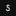
<style>
.page{position:relative;width:16px;height:16px;background:#101010}
.page>*{position:absolute;margin:0}
.t1{font:14px "Champagne&Limousines";letter-spacing:0.025em}
</style>
<div class="page">
<p class="t1" style="left:6px;top:4px;width:4px;height:8px">s</p>
</div>
